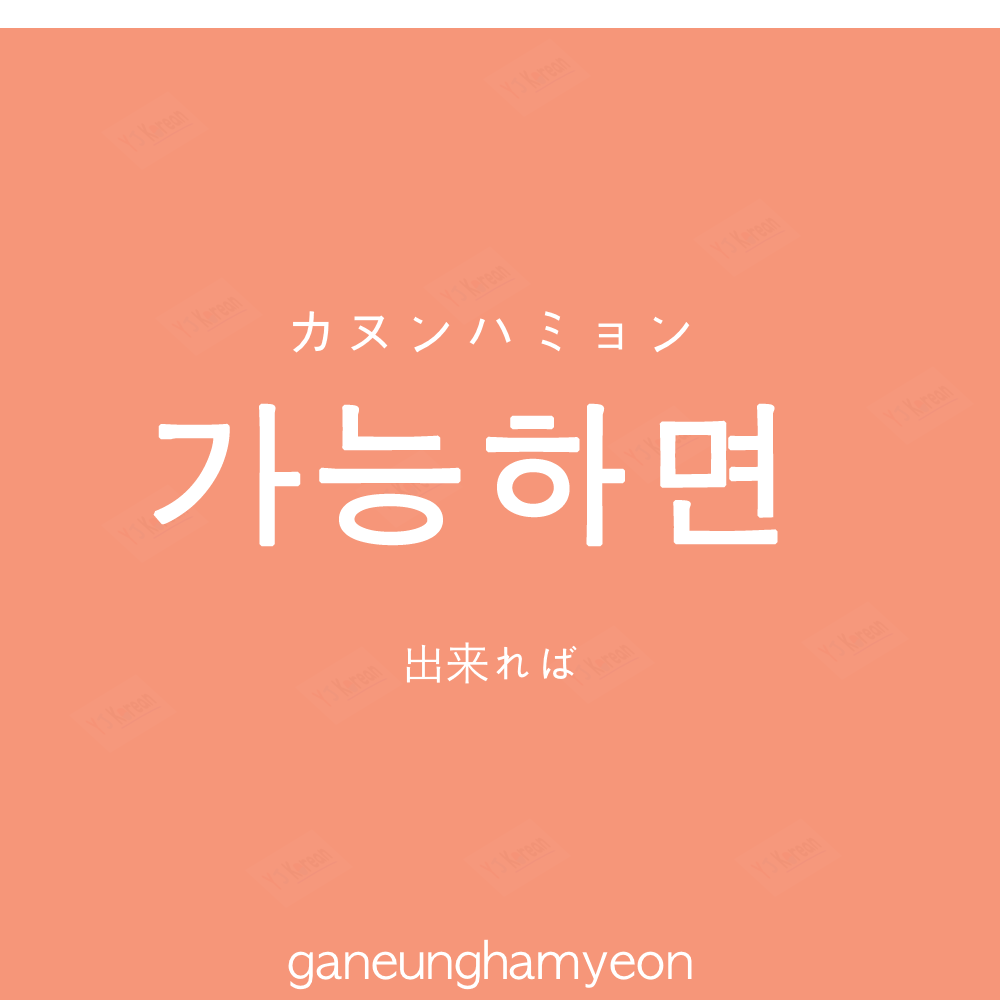
<style>
.page{position:relative;width:1000px;height:1000px;background:#f69679}
.page>*{position:absolute;margin:0}
.t1{font:60px "AppleGothic";color:#ffffff}
.t2{font:154px "AppleGothic";letter-spacing:0.04em;color:#ffffff;font-weight:bold}
.t3{font:45px "AppleGothic";color:#ffffff}
.t4{font:45px "HiraKakuProN-W3";color:#ffffff}
.t5{font:50px "AppleGothic";color:#ffffff}
</style>
<div class="page">
<p class="t1" style="left:293px;top:311px;width:397px;height:42px">カヌンハミョン</p>
<p class="t2" style="left:153px;top:403px;width:625px;height:144px">가능하면</p>
<p class="t3" style="left:406px;top:642px;width:171px;height:42px">出<span class="t4">来</span>れば</p>
<p class="t5" style="left:288px;top:939px;width:404px;height:51px">ganeunghamyeon</p>
</div>
